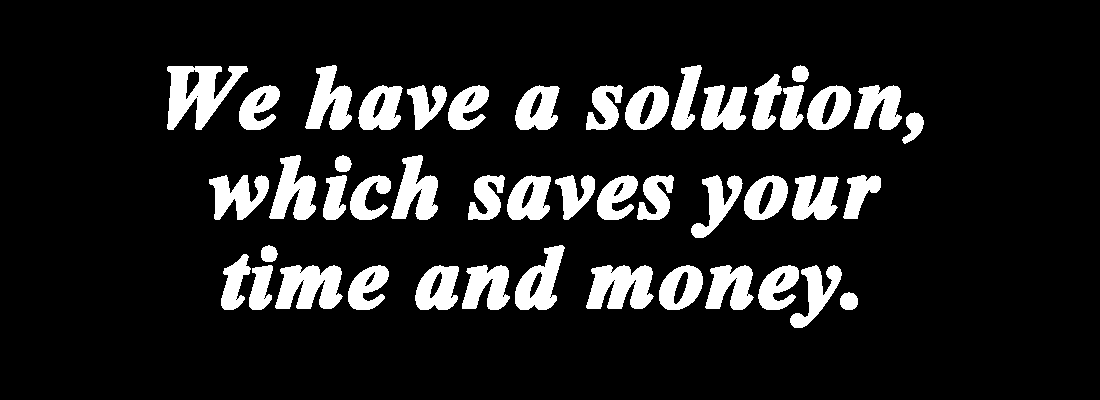
<style>
.page{position:relative;width:1100px;height:400px;background:#000000}
.page>*{position:absolute;margin:0}
.t1{font:110px/30px "Vijaya-Bold";color:#ffffff;font-weight:bold}
</style>
<div class="page">
<p class="t1" style="left:167px;top:65px;width:757px;height:263px;text-align:center">We have a solution,<br><br><br>which saves your <br><br><br>time and money.</p>
</div>
